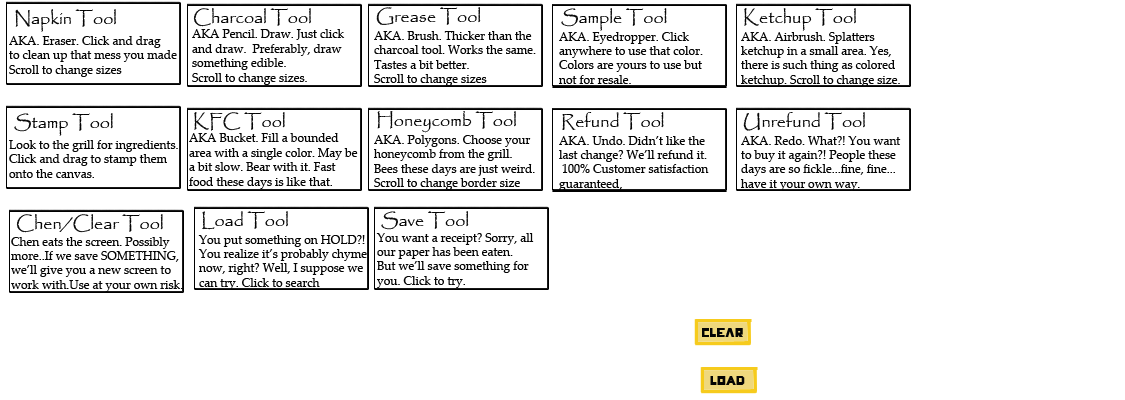
<style>
.page{position:relative;width:1125px;height:400px;background:#ffffff}
.page>*{position:absolute;margin:0}
.t1{font:18px "Papyrus-Regular";color:#040404}
.t2{font:12px "PalatinoLinotype-Roman";color:#040404}
.t3{font:14px "Papyrus-Regular";color:#040404}
</style>
<div class="page">
<p class="t1" style="left:15px;top:9px;width:101px;height:23px">Napkin Tool</p>
<p class="t1" style="left:193px;top:8px;width:118px;height:19px">Charcoal Tool</p>
<p class="t1" style="left:376px;top:7px;width:105px;height:18px">Grease Tool</p>
<p class="t1" style="left:561px;top:8px;width:106px;height:23px">Sample Tool</p>
<p class="t1" style="left:744px;top:8px;width:112px;height:23px">Ketchup Tool</p>
<p class="t2" style="left:192px;top:29px;width:153px;height:56px"><span class="t3"><br></span>AKA Pencil. Draw. Just click <br>and draw.  Preferably, draw <br>something edible.<br>Scroll to change sizes.</p>
<p class="t2" style="left:9px;top:36px;width:168px;height:41px">AKA. Eraser. Click and drag<br>to clean up that mess you made<br>Scroll to change sizes</p>
<p class="t2" style="left:374px;top:31px;width:162px;height:55px">AKA. Brush. Thicker than the<br>charcoal tool. Works the same.<br>Tastes a bit better.<br>Scroll to change sizes</p>
<p class="t2" style="left:559px;top:32px;width:144px;height:52px">AKA. Eyedropper. Click <br>anywhere to use that color.<br>Colors are yours to use but<br>not for resale.</p>
<p class="t2" style="left:741px;top:32px;width:159px;height:55px">AKA. Airbrush. Splatters <br>ketchup in a small area. Yes, <br>there is such thing as colored<br>ketchup. Scroll to change size.</p>
<p class="t1" style="left:14px;top:113px;width:99px;height:23px">Stamp Tool</p>
<p class="t1" style="left:194px;top:112px;width:91px;height:19px">KFC Tool</p>
<p class="t1" style="left:377px;top:111px;width:139px;height:22px">Honeycomb Tool</p>
<p class="t1" style="left:562px;top:112px;width:102px;height:18px">Refund Tool</p>
<p class="t1" style="left:743px;top:112px;width:122px;height:19px">Unrefund Tool</p>
<p class="t2" style="left:189px;top:133px;width:169px;height:56px"><span class="t3"><br></span>AKA Bucket. Fill a bounded<br>area with a single color. May be <br>a bit slow. Bear with it. Fast<br>food these days is like that.</p>
<p class="t2" style="left:374px;top:135px;width:161px;height:55px">AKA. Polygons. Choose your<br>honeycomb from the grill.<br>Bees these days are just weird.<br>Scroll to change border size</p>
<p class="t2" style="left:559px;top:136px;width:150px;height:55px">AKA. Undo. Didn’t like the <br>last change? We’ll refund it.<br> 100% Customer satisfaction <br>guaranteed,</p>
<p class="t2" style="left:741px;top:136px;width:160px;height:55px">AKA. Redo. What?! You want<br>to buy it again?! People these<br>days are so fickle...fine, fine...<br>have it your own way.</p>
<p class="t2" style="left:9px;top:140px;width:169px;height:38px">Look to the grill for ingredients.<br>Click and drag to stamp them<br>onto the canvas.</p>
<p class="t1" style="left:16px;top:214px;width:147px;height:19px">Chen/Clear Tool</p>
<p class="t1" style="left:202px;top:211px;width:86px;height:19px">Load Tool</p>
<p class="t1" style="left:381px;top:211px;width:88px;height:19px">Save Tool</p>
<p class="t2" style="left:376px;top:233px;width:158px;height:55px">You want a receipt? Sorry, all<br>our paper has been eaten.<br>But we’ll save something for<br>you. Click to try.</p>
<p class="t2" style="left:11px;top:237px;width:172px;height:55px">Chen eats the screen. Possibly <br>more..If we save SOMETHING,<br>we’ll give you a new screen to<br>work with.Use at your own risk.</p>
<p class="t2" style="left:198px;top:235px;width:169px;height:55px">You put something on HOLD?!<br>You realize it’s probably chyme<br>now, right? Well, I suppose we<br>can try. Click to search</p>
</div>
